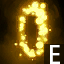
<style>
.page{position:relative;width:64px;height:64px}
.page>*{position:absolute;margin:0}
.t1{font:24px "AdobeFanHeitiStd-Bold";color:#ffffff}
</style>
<div class="page">
<p class="t1" style="left:50px;top:45px;width:10px;height:19px">E</p>
</div>
